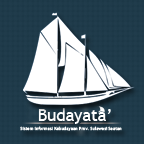
<style>
.page{position:relative;width:144px;height:144px}
.page>*{position:absolute;margin:0}
.t1{font:16.6px "TrebuchetMS";color:#ffffff}
.t2{font:4.4px "TrebuchetMS";color:#ffffff}
</style>
<div class="page">
<p class="t1" style="left:38px;top:108px;width:73px;height:16px">Budayata’</p>
<p class="t2" style="left:20px;top:126px;width:102px;height:5px">Sistem Informasi Kebudayaan Prov. Sulawesi Seatan</p>
</div>
